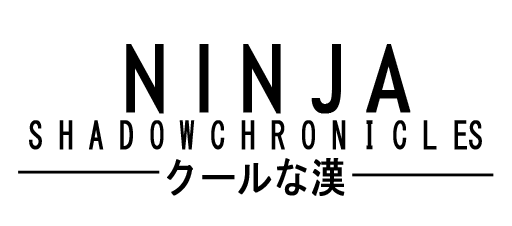
<style>
.page{position:relative;width:512px;height:226px;background:#ffffff}
.page>*{position:absolute;margin:0}
.t1{font:93.5px "TrebuchetMS";color:#000000;font-weight:bold;scale:0.77 1}
.t2{font:37.4px "MS-Gothic";color:#000000;font-weight:bold;scale:0.77 1}
.t3{font:42.1px "MS-Gothic";color:#000000;font-weight:bold;scale:0.85 1}
.t4{font:12.7px "LucidaBright";color:#000000;font-weight:bold;scale:0.85 1}
</style>
<div class="page">
<p class="t1" style="left:126px;top:44px;width:285px;height:70px">N I N J A</p>
<p class="t2" style="left:29px;top:120px;width:453px;height:30px">S H A D O W C H R O N I C L ES</p>
<p class="t3" style="left:167px;top:158px;width:178px;height:38px"><span class="t4"><br></span><br>クールな漢</p>
</div>
